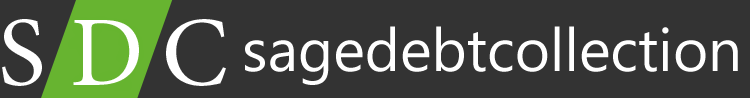
<style>
.page{position:relative;width:750px;height:98px;background:#333333}
.page>*{position:absolute;margin:0}
.t1{font:100px "MinionPro-Regular";color:#ffffff}
.t2{font:60px "SegoeUI";color:#ffffff}
</style>
<div class="page">
<p class="t1" style="left:2px;top:19px;width:40px;height:67px">S</p>
<p class="t1" style="left:166px;top:19px;width:60px;height:67px">C</p>
<p class="t2" style="left:245px;top:26px;width:493px;height:59px">sagedebtcollection</p>
</div>
